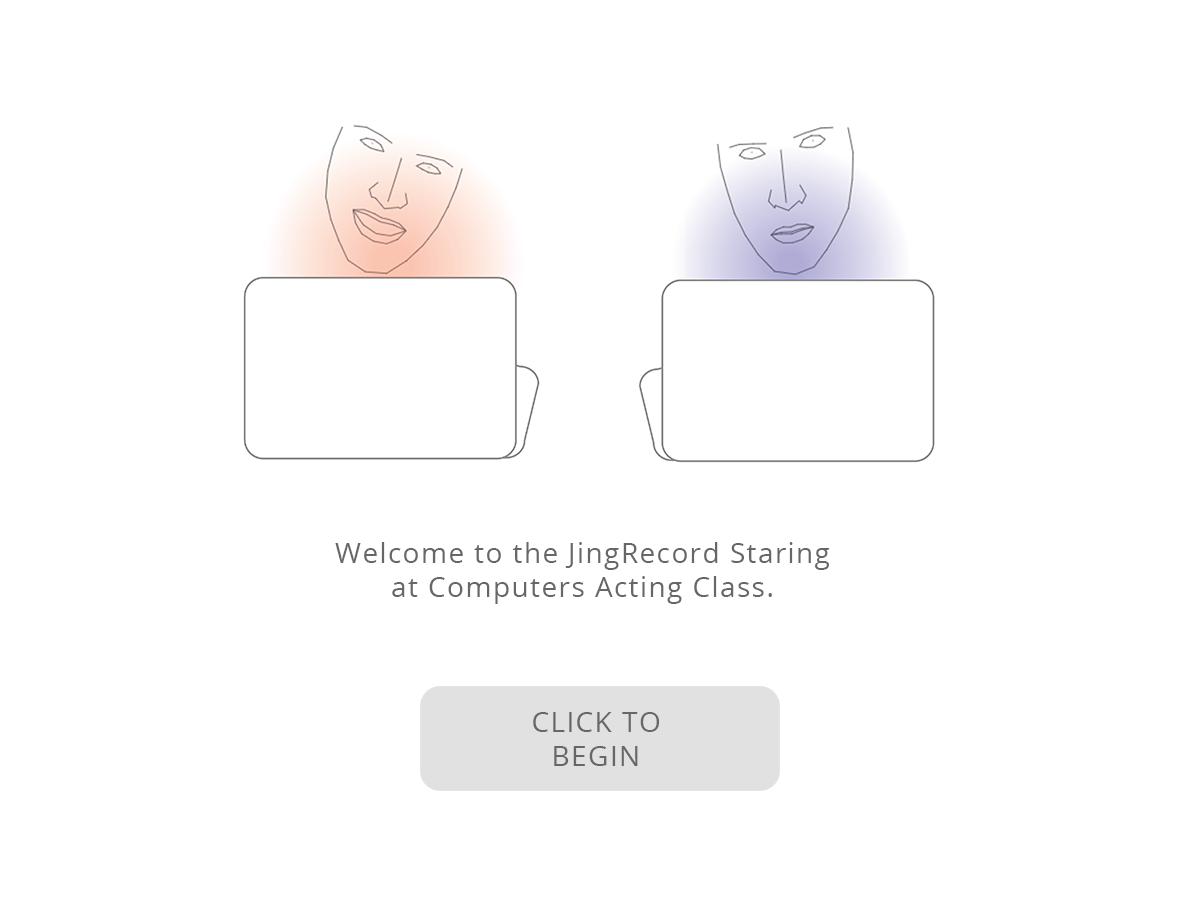
<style>
.page{position:relative;width:1200px;height:900px;background:#ffffff}
.page>*{position:absolute;margin:0}
.t1{font:28px "OpenSans";letter-spacing:0.05em;color:#676767}
</style>
<div class="page">
<p class="t1" style="left:335px;top:542px;width:495px;height:62px;text-align:center">Welcome to the JingRecord Staring at Computers Acting Class.</p>
<p class="t1" style="left:533px;top:712px;width:127px;height:54px;text-align:center">CLICK TO BEGIN</p>
</div>
